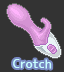
<style>
.page{position:relative;width:64px;height:72px;background:#333333}
.page>*{position:absolute;margin:0}
.t1{font:12px "JK-Gothic-M";color:#c9ffff}
</style>
<div class="page">
<p class="t1" style="left:13px;top:59px;width:39px;height:10px">Crotch</p>
</div>
